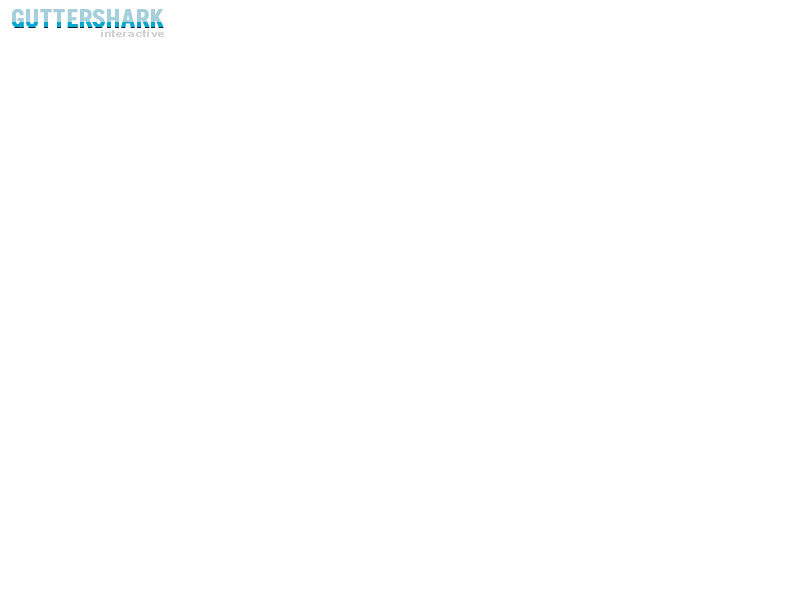
<style>
.page{position:relative;width:800px;height:600px;background:#ffffff}
.page>*{position:absolute;margin:0}
.t1{font:24px "TradeGothic-Bold";color:#a5cfda;font-weight:bold}
.t2{font:10px "Arial-BoldMT";color:#d1d3d3;font-weight:bold}
</style>
<div class="page">
<p class="t1" style="left:12px;top:9px;width:152px;height:19px">GUTTERSHARK</p>
<p class="t2" style="left:101px;top:30px;width:63px;height:7px">interactive</p>
</div>
